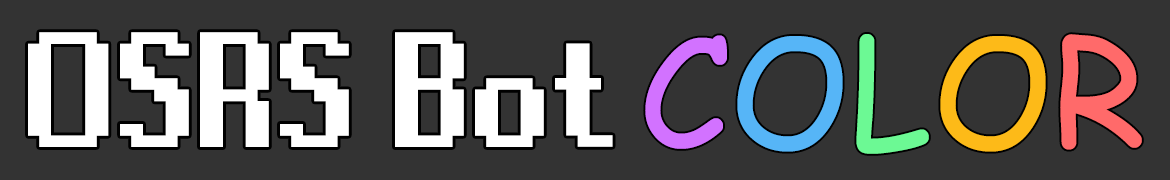
<style>
.page{position:relative;width:1170px;height:180px;background:#333333}
.page>*{position:absolute;margin:0}
.t1{font:183.3px "RuneScape-UF";color:#ffffff}
.t2{font:150px "ComicSansMS";color:#d272ff}
.t3{font:150px "ComicSansMS";color:#56b5f7}
.t4{font:150px "ComicSansMS";color:#6cf994}
.t5{font:150px "ComicSansMS";color:#fdba18}
.t6{font:150px "ComicSansMS";color:#ff6a6a}
</style>
<div class="page">
<p class="t1" style="left:28px;top:32px;width:585px;height:115px">OSRS Bot</p>
<p class="t2" style="left:645px;top:34px;width:497px;height:120px">C<span class="t3">O</span><span class="t4">L</span><span class="t5">O</span><span class="t6">R</span></p>
</div>
